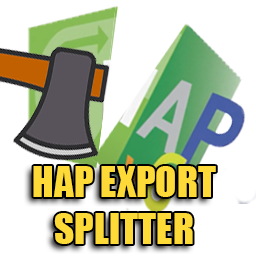
<style>
.page{position:relative;width:256px;height:256px;background:#ffffff}
.page>*{position:absolute;margin:0}
.t1{font:39.2px "Impact";color:#fdda37}
</style>
<div class="page">
<p class="t1" style="left:33px;top:166px;width:183px;height:78px;text-align:center">HAP EXPORT<br>SPLITTER</p>
</div>
